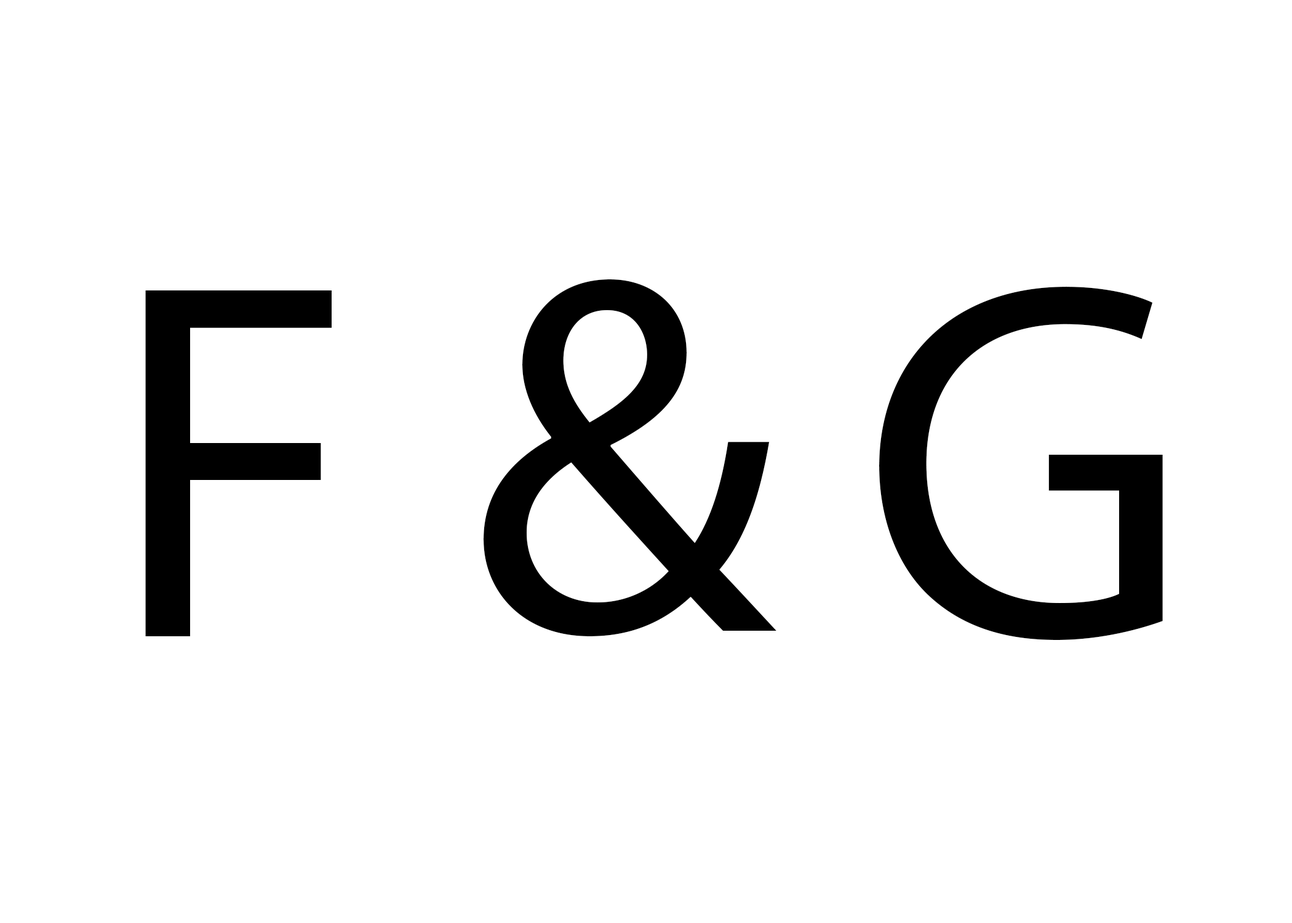
<style>
.page{position:relative;width:1292px;height:923px;background:#ffffff}
.page>*{position:absolute;margin:0}
.t1{font:512.7px "MyriadPro-Regular";color:#000000}
</style>
<div class="page">
<p class="t1" style="left:484px;top:279px;width:292px;height:357px">&amp;</p>
<p class="t1" style="left:145px;top:290px;width:187px;height:346px">F</p>
<p class="t1" style="left:879px;top:287px;width:284px;height:353px">G</p>
</div>
